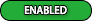
<style>
.page{position:relative;width:92px;height:21px;background:#24ac38}
.page>*{position:absolute;margin:0}
.t1{font:10px "AdobeHeitiStd-Regular";color:#ffffff}
</style>
<div class="page">
<p class="t1" style="left:24px;top:6px;width:43px;height:9px">ENABLED</p>
</div>
